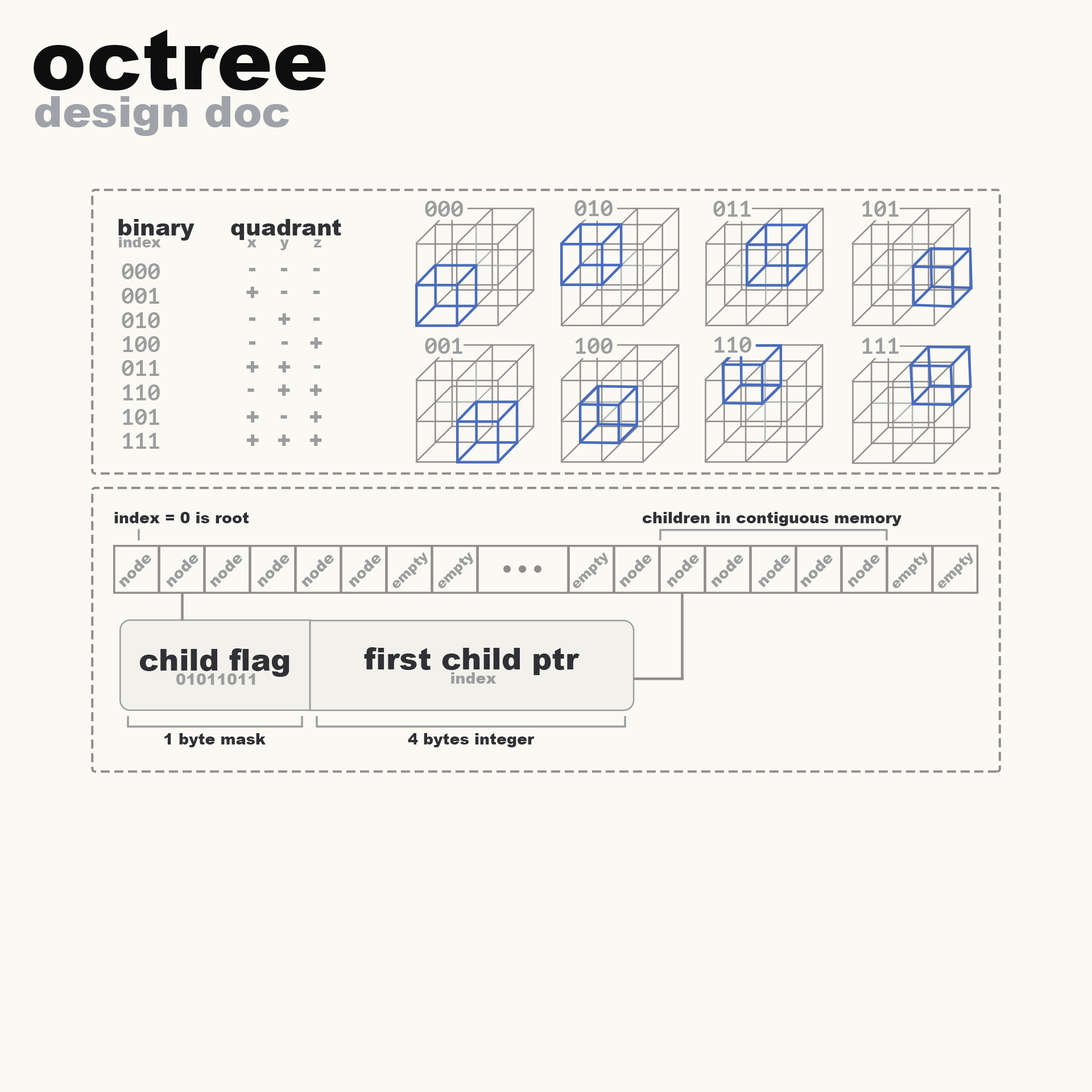
<style>
.page{position:relative;width:1092px;height:1092px;background:#faf9f3}
.page>*{position:absolute;margin:0}
.t1{font:83.6px "Arial-Black";color:#0e0e0e}
.t2{font:43.2px "Arial-Black";color:#a0a2a9}
.t3{font:22.2px "PTMono-Bold";color:#9d9d9f}
.t4{font:22.7px "Arial-Black";color:#303035}
.t5{font:14.2px "Arial-Black";color:#9d9d9f}
.t6{font:22.2px "Arial-Black";color:#9d9d9f}
.t7{font:15.4px "Arial-Black";color:#303035}
.t8{font:15.4px "Arial-Black";color:#9d9d9f}
.t9{font:13.6px "Arial-Black";color:#9d9d9f}
.t10{font:30.1px "Arial-Black";color:#303035}
</style>
<div class="page">
<p class="t1" style="left:34px;top:30px;width:292px;height:60px">octree</p>
<p class="t2" style="left:35px;top:96px;width:254px;height:40px">design doc</p>
<p class="t3" style="left:425px;top:201px;width:38px;height:16px">000</p>
<p class="t3" style="left:574px;top:200px;width:39px;height:16px">010</p>
<p class="t3" style="left:713px;top:201px;width:38px;height:16px">011</p>
<p class="t3" style="left:862px;top:201px;width:37px;height:16px">101</p>
<p class="t4" style="left:118px;top:219px;width:77px;height:22px">binary</p>
<p class="t4" style="left:231px;top:219px;width:110px;height:21px">quadrant</p>
<p class="t5" style="left:119px;top:237px;width:42px;height:10px">index</p>
<p class="t5" style="left:247px;top:239px;width:10px;height:8px">x</p>
<p class="t5" style="left:280px;top:239px;width:9px;height:11px">y</p>
<p class="t5" style="left:313px;top:239px;width:8px;height:8px">z</p>
<p class="t3" style="left:122px;top:263px;width:38px;height:16px">000</p>
<p class="t6" style="left:249px;top:268px;width:7px;height:3px">-</p>
<p class="t6" style="left:280px;top:268px;width:8px;height:3px">-</p>
<p class="t6" style="left:313px;top:268px;width:7px;height:3px">-</p>
<p class="t3" style="left:122px;top:288px;width:37px;height:16px">001</p>
<p class="t6" style="left:246px;top:287px;width:13px;height:11px">+</p>
<p class="t6" style="left:280px;top:291px;width:8px;height:3px">-</p>
<p class="t6" style="left:313px;top:291px;width:7px;height:3px">-</p>
<p class="t3" style="left:122px;top:312px;width:38px;height:16px">010</p>
<p class="t6" style="left:249px;top:317px;width:7px;height:4px">-</p>
<p class="t6" style="left:278px;top:313px;width:13px;height:12px">+</p>
<p class="t6" style="left:313px;top:317px;width:7px;height:4px">-</p>
<p class="t3" style="left:122px;top:336px;width:38px;height:16px">100</p>
<p class="t6" style="left:249px;top:341px;width:7px;height:4px">-</p>
<p class="t6" style="left:281px;top:341px;width:7px;height:4px">-</p>
<p class="t6" style="left:310px;top:337px;width:12px;height:12px">+</p>
<p class="t3" style="left:425px;top:338px;width:37px;height:16px">001</p>
<p class="t3" style="left:575px;top:338px;width:38px;height:16px">100</p>
<p class="t3" style="left:714px;top:337px;width:37px;height:16px">110</p>
<p class="t3" style="left:862px;top:338px;width:37px;height:16px">111</p>
<p class="t3" style="left:122px;top:360px;width:37px;height:16px">011</p>
<p class="t6" style="left:246px;top:361px;width:13px;height:12px">+</p>
<p class="t6" style="left:278px;top:361px;width:13px;height:12px">+</p>
<p class="t6" style="left:313px;top:365px;width:8px;height:4px">-</p>
<p class="t3" style="left:122px;top:384px;width:38px;height:16px">110</p>
<p class="t6" style="left:247px;top:388px;width:7px;height:4px;rotate:180deg">-</p>
<p class="t6" style="left:278px;top:384px;width:12px;height:12px;rotate:180deg">+</p>
<p class="t6" style="left:309px;top:384px;width:13px;height:12px;rotate:180deg">+</p>
<p class="t3" style="left:122px;top:409px;width:37px;height:16px">101</p>
<p class="t6" style="left:246px;top:411px;width:13px;height:12px;rotate:180deg">+</p>
<p class="t6" style="left:309px;top:411px;width:13px;height:12px;rotate:180deg">+</p>
<p class="t6" style="left:280px;top:415px;width:7px;height:4px;rotate:180deg">-</p>
<p class="t3" style="left:122px;top:433px;width:37px;height:16px">111</p>
<p class="t6" style="left:246px;top:435px;width:13px;height:11px;rotate:180deg">+</p>
<p class="t6" style="left:278px;top:435px;width:12px;height:11px;rotate:180deg">+</p>
<p class="t6" style="left:309px;top:435px;width:13px;height:11px;rotate:180deg">+</p>
<p class="t7" style="left:114px;top:512px;width:135px;height:11px">index = 0 is root</p>
<p class="t7" style="left:643px;top:512px;width:258px;height:14px">children in contiguous memory</p>
<p class="t8" style="left:119px;top:555px;width:32px;height:33px;rotate:-45deg">node</p>
<p class="t8" style="left:166px;top:555px;width:32px;height:33px;rotate:-45deg">node</p>
<p class="t8" style="left:210px;top:555px;width:32px;height:33px;rotate:-45deg">node</p>
<p class="t8" style="left:257px;top:555px;width:32px;height:33px;rotate:-45deg">node</p>
<p class="t8" style="left:301px;top:555px;width:33px;height:33px;rotate:-45deg">node</p>
<p class="t8" style="left:349px;top:555px;width:32px;height:33px;rotate:-45deg">node</p>
<p class="t9" style="left:392px;top:552px;width:36px;height:36px;rotate:-45deg">empty</p>
<p class="t9" style="left:438px;top:552px;width:35px;height:36px;rotate:-45deg">empty</p>
<p class="t9" style="left:573px;top:552px;width:35px;height:36px;rotate:-45deg">empty</p>
<p class="t8" style="left:619px;top:555px;width:33px;height:33px;rotate:-45deg">node</p>
<p class="t8" style="left:667px;top:555px;width:32px;height:33px;rotate:-45deg">node</p>
<p class="t8" style="left:711px;top:555px;width:32px;height:33px;rotate:-45deg">node</p>
<p class="t8" style="left:758px;top:555px;width:33px;height:33px;rotate:-45deg">node</p>
<p class="t8" style="left:800px;top:555px;width:33px;height:33px;rotate:-45deg">node</p>
<p class="t8" style="left:847px;top:555px;width:33px;height:33px;rotate:-45deg">node</p>
<p class="t9" style="left:892px;top:552px;width:36px;height:36px;rotate:-45deg">empty</p>
<p class="t9" style="left:938px;top:552px;width:35px;height:36px;rotate:-45deg">empty</p>
<p class="t10" style="left:139px;top:648px;width:150px;height:29px">child flag</p>
<p class="t10" style="left:364px;top:647px;width:216px;height:28px">first child ptr</p>
<p class="t8" style="left:176px;top:673px;width:79px;height:12px">01011011</p>
<p class="t8" style="left:451px;top:672px;width:46px;height:12px">index</p>
<p class="t7" style="left:164px;top:733px;width:102px;height:14px">1 byte mask</p>
<p class="t7" style="left:408px;top:733px;width:127px;height:14px">4 bytes integer</p>
</div>
